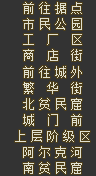
<style>
.page{position:relative;width:96px;height:176px;background:#333333}
.page>*{position:absolute;margin:0}
.t1{font:12px "SimSun";color:#e0e0d0}
</style>
<div class="page">
<p class="t1" style="left:23px;top:2px;width:59px;height:12px">前往据点</p>
<p class="t1" style="left:23px;top:18px;width:59px;height:12px">市民公园</p>
<p class="t1" style="left:23px;top:34px;width:59px;height:11px">工厂区</p>
<p class="t1" style="left:23px;top:49px;width:59px;height:12px">商店街</p>
<p class="t1" style="left:23px;top:66px;width:59px;height:12px">前往城外</p>
<p class="t1" style="left:23px;top:82px;width:59px;height:12px">繁华街</p>
<p class="t1" style="left:23px;top:98px;width:59px;height:12px">北贫民窟</p>
<p class="t1" style="left:23px;top:114px;width:59px;height:12px">城门前</p>
<p class="t1" style="left:15px;top:130px;width:75px;height:12px">上层阶级区</p>
<p class="t1" style="left:23px;top:146px;width:59px;height:12px">阿尔克河</p>
<p class="t1" style="left:23px;top:162px;width:59px;height:12px">南贫民窟</p>
</div>
